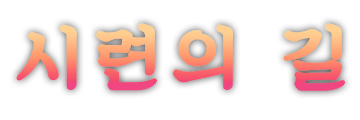
<style>
.page{position:relative;width:360px;height:120px;background:#ffffff}
.page>*{position:absolute;margin:0}
.t1{font:73px "SDKukdetopokki-aLt";letter-spacing:0.12em;font-weight:bold}
</style>
<div class="page">
<p class="t1" style="left:16px;top:23px;width:329px;height:68px">시련의 길</p>
</div>
